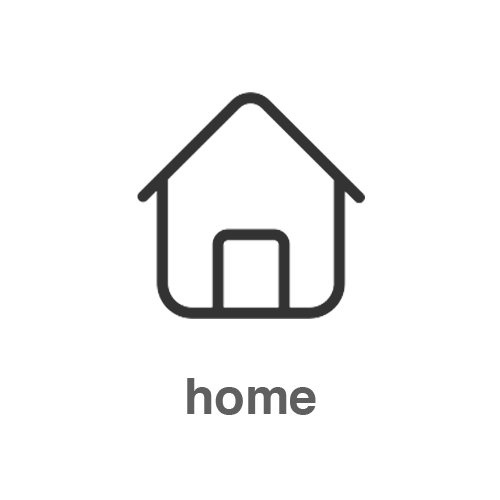
<style>
.page{position:relative;width:500px;height:500px;background:#ffffff}
.page>*{position:absolute;margin:0}
.t1{font:50px "Helvetica-Bold";color:#5f5f5f}
</style>
<div class="page">
<p class="t1" style="left:187px;top:378px;width:129px;height:37px">home</p>
</div>
